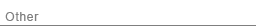
<style>
.page{position:relative;width:256px;height:26px;background:#ffffff}
.page>*{position:absolute;margin:0}
.t1{font:12.4px "ArialMT";letter-spacing:0.05em;color:#7f7f7f}
</style>
<div class="page">
<p class="t1" style="left:5px;top:12px;width:34px;height:9px">Other</p>
</div>
